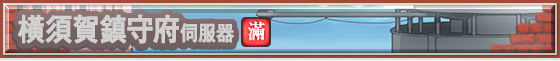
<style>
.page{position:relative;width:560px;height:61px}
.page>*{position:absolute;margin:0}
.t1{font:30.4px "GothicMB101Pr6N-Medium";font-weight:bold;scale:0.88 1}
.t2{font:20.3px "GothicMB101Pr6N-Medium";font-weight:bold;scale:0.88 1}
.t3{font:30px "GothicMB101Pr6N-Medium";color:#d1d1d1;font-weight:bold;scale:0.89 1}
.t4{font:20px "GothicMB101Pr6N-Medium";color:#d1d1d1;font-weight:bold;scale:0.89 1}
.t5{font:20px "RyuminPr6N-ExBold";letter-spacing:-0.04em;color:#ffffff;scale:0.9 1}
</style>
<div class="page">
<p class="t1" style="left:16px;top:16px;width:218px;height:30px">橫須賀鎮守府<span class="t2">伺服器</span></p>
<p class="t3" style="left:17px;top:14px;width:217px;height:30px">橫須賀鎮守府<span class="t4">伺服器</span></p>
<p class="t5" style="left:248px;top:21px;width:17px;height:20px">滿</p>
</div>
